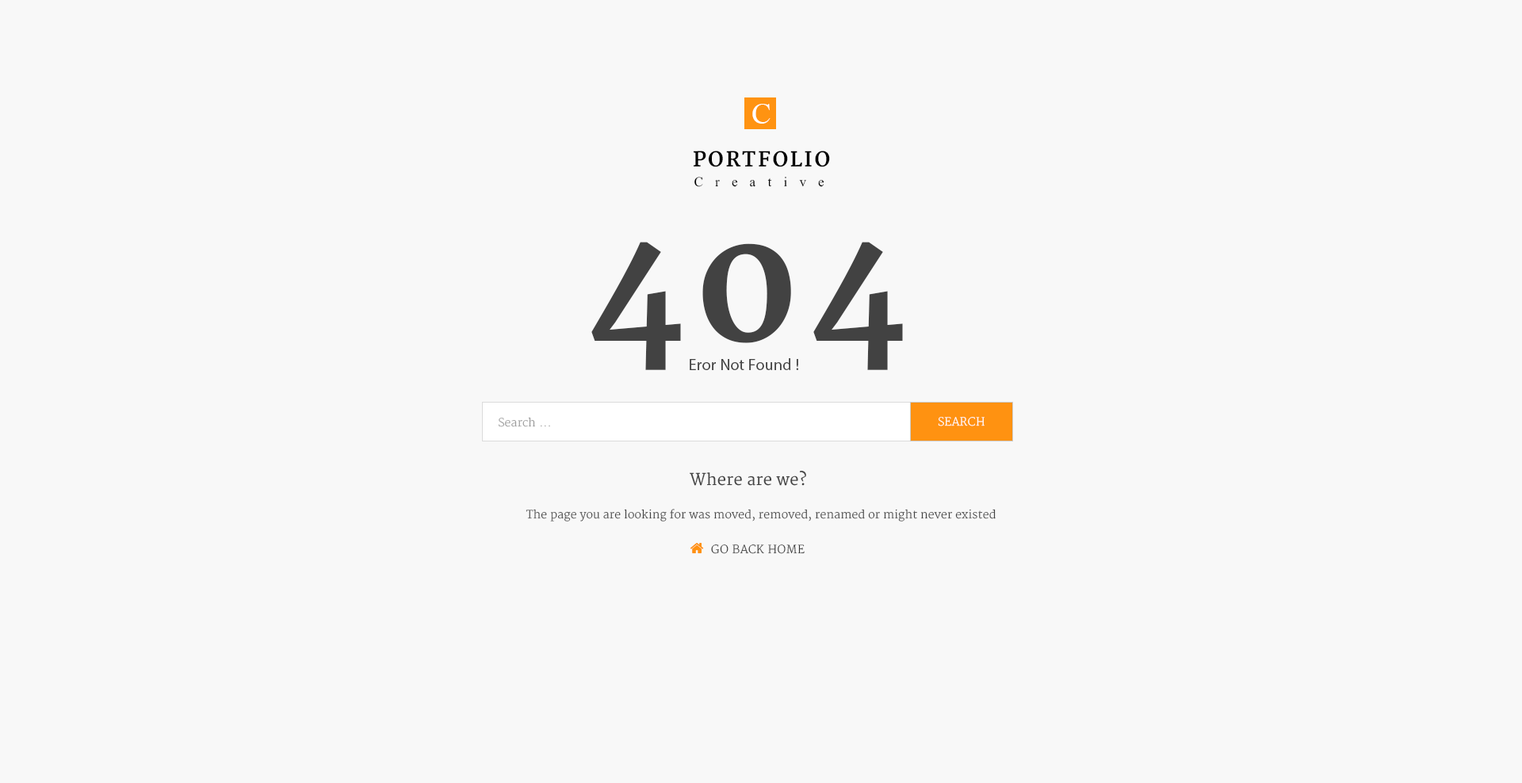
<style>
.page{position:relative;width:1522px;height:783px;background:#f8f8f8}
.page>*{position:absolute;margin:0}
.t1{font:29.1px "IskoolaPota";letter-spacing:0.012em;color:#ffffff;text-transform:uppercase}
.t2{font:20.2px "Merriweather-Bold";letter-spacing:0.1em;color:#000000;text-transform:uppercase}
.t3{font:20.2px "MicrosoftHimalaya";letter-spacing:0.6em;color:#000000}
.t4{font:158.6px "Merriweather-Bold";letter-spacing:0.052em;color:#424242}
.t5{font:15.9px "MyriadPro-Regular";letter-spacing:0.012em;color:#424242}
.t6{font:15.9px "MyriadPro-Regular";letter-spacing:0.012em;color:#424242;text-transform:uppercase}
.t7{font:11.1px "Merriweather-Light";letter-spacing:0.012em;color:#999999}
.t8{font:11.1px "Merriweather-Light";letter-spacing:0.012em;color:#ffffff;text-transform:uppercase}
.t9{font:15.9px "Merriweather";letter-spacing:0.012em;color:#424242}
.t10{font:11.1px "Merriweather-Light";letter-spacing:0.012em;color:#424242}
.t11{font:11.1px "Merriweather-Light";letter-spacing:0.012em;color:#363636}
</style>
<div class="page">
<p class="t1" style="left:752px;top:104px;width:19px;height:20px">C</p>
<p class="t2" style="left:694px;top:151px;width:136px;height:16px">Portfolio</p>
<p class="t3" style="left:695px;top:177px;width:130px;height:10px">Creative</p>
<p class="t4" style="left:591px;top:242px;width:312px;height:128px">404</p>
<p class="t5" style="left:690px;top:358px;width:108px;height:12px"><span class="t6">E</span>ror Not Found !</p>
<p class="t7" style="left:499px;top:417px;width:51px;height:10px">Search ...</p>
<p class="t8" style="left:938px;top:417px;width:47px;height:10px">Search</p>
<p class="t9" style="left:690px;top:471px;width:116px;height:15px">Where are we?</p>
<p class="t10" style="left:526px;top:509px;width:470px;height:13px">The page you are looking for was moved, removed, renamed or might never existed</p>
<p class="t11" style="left:711px;top:545px;width:94px;height:9px">GO BACK HOME</p>
</div>
